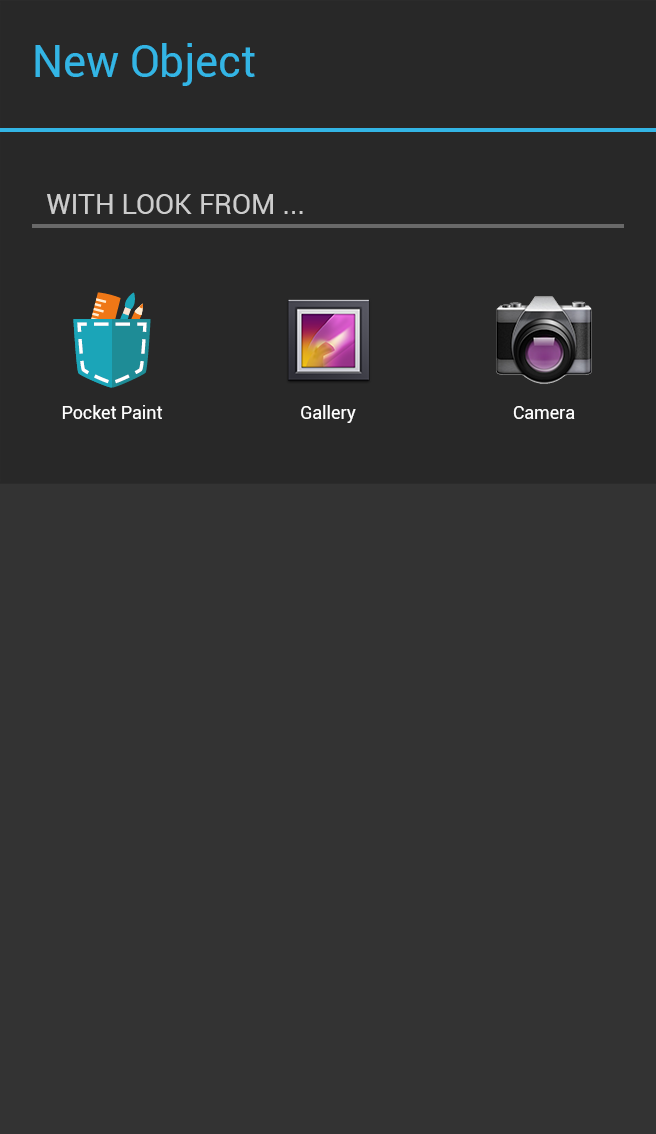
<style>
.page{position:relative;width:656px;height:1134px;background:#333333}
.page>*{position:absolute;margin:0}
.t1{font:44.4px "Roboto-Regular";color:#33b5e5}
.t2{font:28.4px "Roboto-Regular";color:#cccccc}
.t3{font:18px "Roboto-Regular";color:#ffffff}
</style>
<div class="page">
<p class="t1" style="left:35px;top:43px;width:220px;height:43px">New Object</p>
<p class="t2" style="left:47px;top:194px;width:256px;height:20px">WITH LOOK FROM ...</p>
<p class="t3" style="left:62px;top:405px;width:101px;height:14px">Pocket Paint</p>
<p class="t3" style="left:301px;top:405px;width:55px;height:18px">Gallery</p>
<p class="t3" style="left:513px;top:406px;width:62px;height:13px">Camera</p>
</div>
